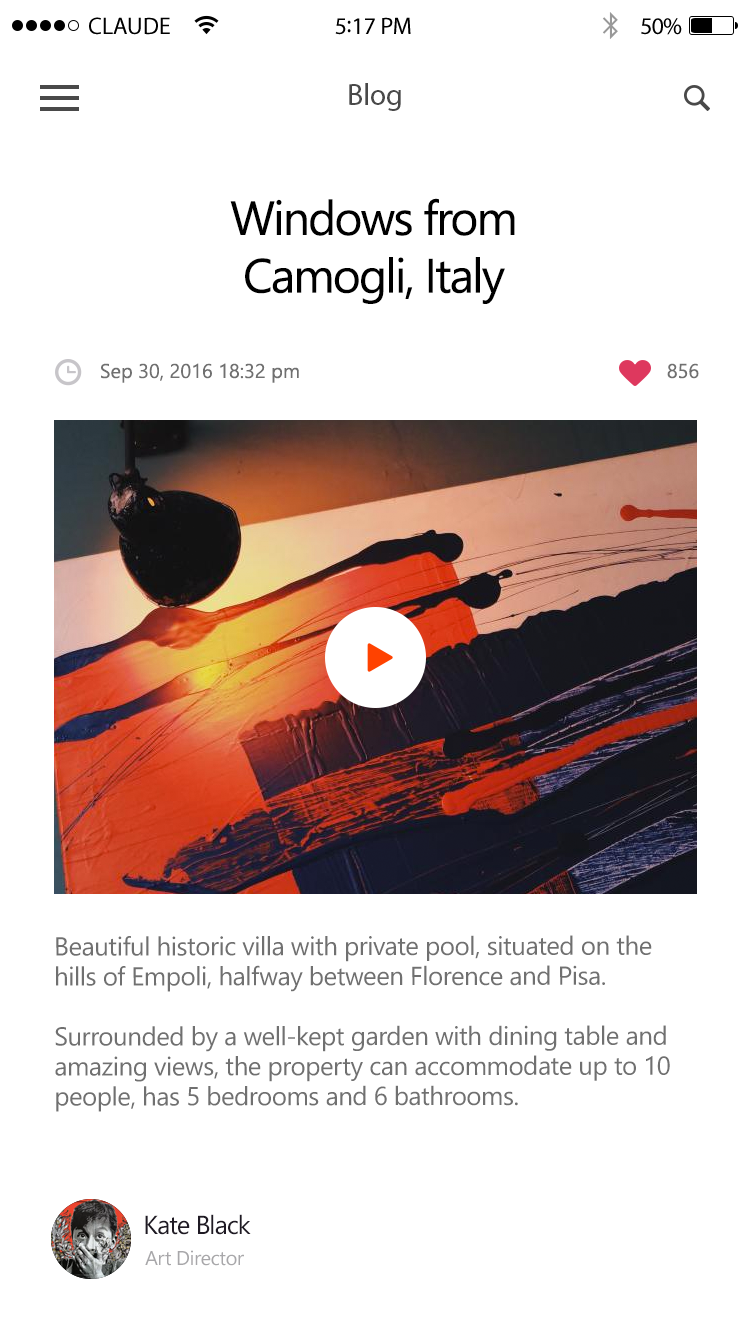
<style>
.page{position:relative;width:750px;height:1334px;background:#ffffff}
.page>*{position:absolute;margin:0}
.t1{font:24px "MyriadPro-Regular";color:#000000;text-transform:uppercase}
.t2{font:24px "MyriadPro-Regular";color:#000000}
.t3{font:24px "MyriadPro-Regular";letter-spacing:-0.02em;color:#000000}
.t4{font:30px "MyriadPro-Regular";color:#494949}
.t5{font:48px "SegoeUI";letter-spacing:-0.04em;color:#000000}
.t6{font:20px "SegoeUI";color:#707070}
.t7{font:26px/30px "SegoeUI";letter-spacing:-0.02em;color:#707070}
.t8{font:26px "SegoeUI";letter-spacing:-0.04em;color:#1f1a24}
.t9{font:20px "SegoeUI";letter-spacing:-0.02em;color:#a8a7aa}
</style>
<div class="page">
<p class="t1" style="left:89px;top:17px;width:81px;height:18px">claude</p>
<p class="t2" style="left:335px;top:17px;width:76px;height:18px">5:17 PM</p>
<p class="t3" style="left:641px;top:18px;width:41px;height:17px">50%</p>
<p class="t4" style="left:349px;top:83px;width:52px;height:28px">Blog</p>
<p class="t5" style="left:230px;top:198px;width:285px;height:106px;text-align:center">Windows from<br>Camogli, Italy</p>
<p class="t6" style="left:101px;top:363px;width:198px;height:20px">Sep 30, 2016 18:32 pm</p>
<p class="t6" style="left:667px;top:363px;width:32px;height:16px">856</p>
<p class="t7" style="left:55px;top:935px;width:615px;height:177px">Beautiful historic villa with private pool, situated on the <br>hills of Empoli, halfway between Florence and Pisa. <br><br>Surrounded by a well-kept garden with dining table and <br>amazing views, the property can accommodate up to 10 <br>people, has 5 bedrooms and 6 bathrooms.</p>
<p class="t8" style="left:145px;top:1214px;width:106px;height:21px">Kate Black</p>
<p class="t9" style="left:145px;top:1250px;width:99px;height:16px">Art Director</p>
</div>
